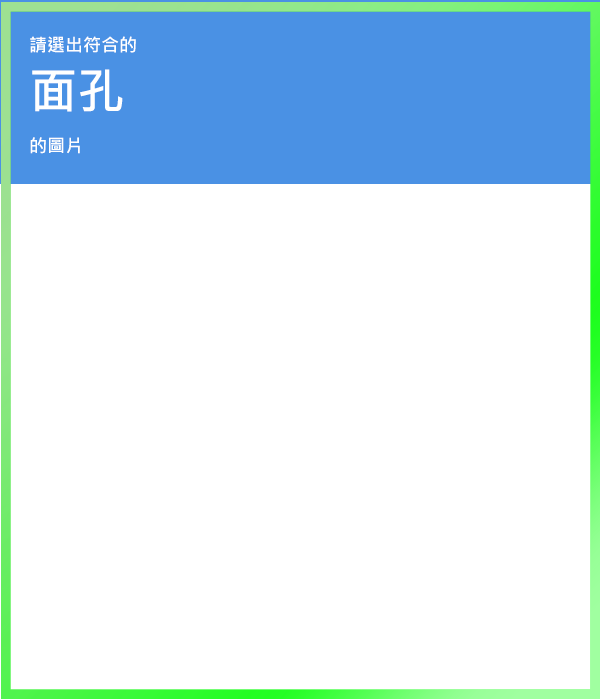
<style>
.page{position:relative;width:600px;height:700px;background:#ffffff}
.page>*{position:absolute;margin:0}
.t1{font:18px "MicrosoftJhengHeiBold";color:#ffffff}
.t2{font:48px "MicrosoftJhengHeiBold";color:#ffffff}
</style>
<div class="page">
<p class="t1" style="left:30px;top:36px;width:106px;height:118px">請選出符合的<br><span class="t2">面孔<br></span><br>的圖片</p>
</div>
